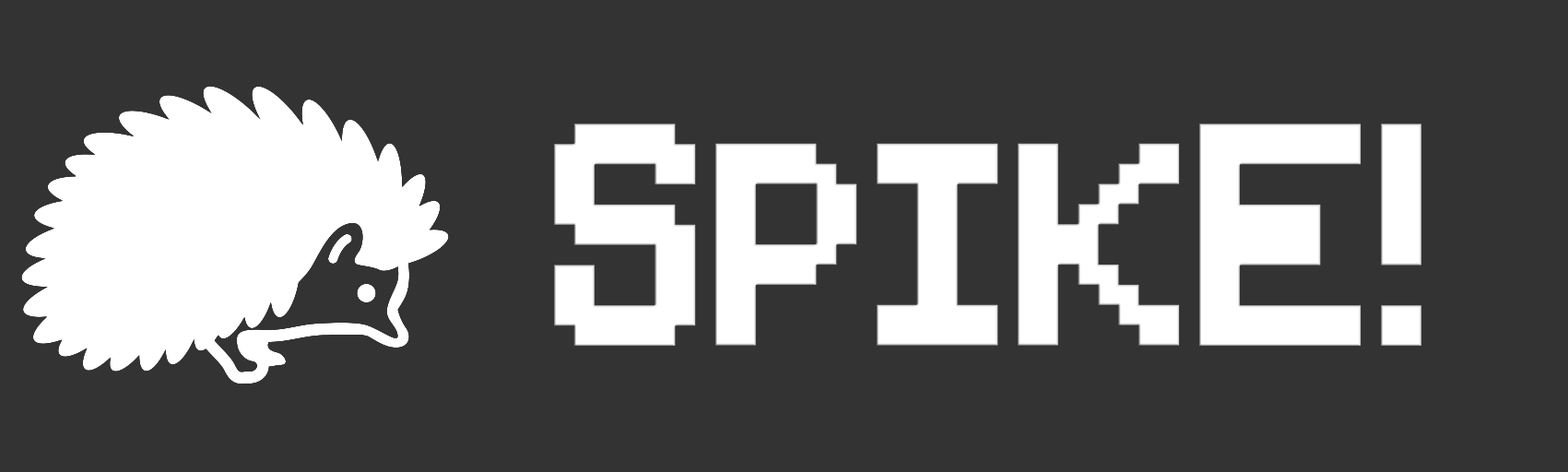
<style>
.page{position:relative;width:1568px;height:472px;background:#333333}
.page>*{position:absolute;margin:0}
.t1{font:322.6px "PreschoolBits";color:#ffffff}
</style>
<div class="page">
<p class="t1" style="left:554px;top:124px;width:867px;height:222px">SPIKE!</p>
</div>
